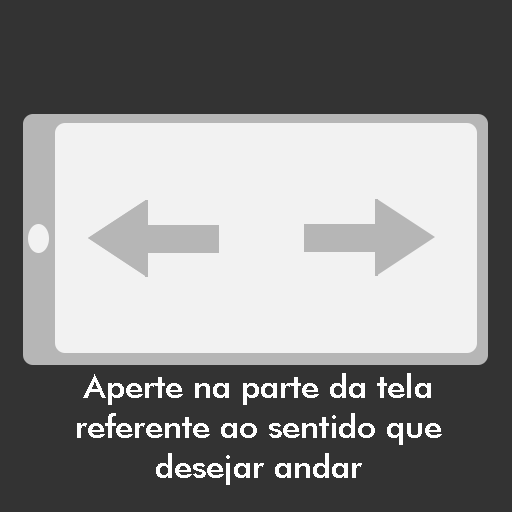
<style>
.page{position:relative;width:512px;height:512px;background:#333333}
.page>*{position:absolute;margin:0}
.t1{font:33.3px "FuturaBT-Medium";color:#ffffff}
</style>
<div class="page">
<p class="t1" style="left:77px;top:373px;width:365px;height:112px;text-align:center">Aperte na parte da tela referente ao sentido que desejar andar</p>
</div>
